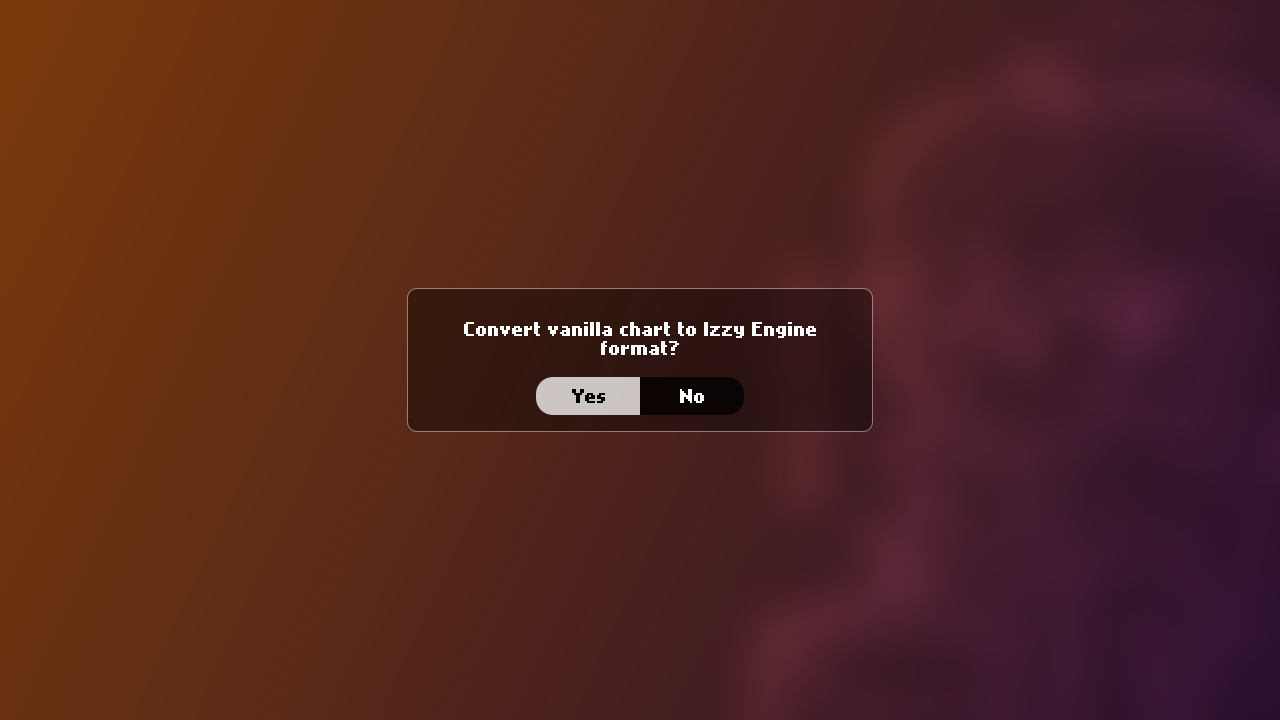
<style>
.page{position:relative;width:1280px;height:720px}
.page>*{position:absolute;margin:0}
.t1{font:16px "NokiaCellphoneFC-Small";color:#ffffff}
.t2{font:16px "NokiaCellphoneFC-Small";color:#000000}
</style>
<div class="page">
<p class="t1" style="left:464px;top:322px;width:352px;height:33px;text-align:center">Convert vanilla chart to Izzy Engine<br>format?</p>
<p class="t2" style="left:572px;top:389px;width:33px;height:14px">Yes</p>
<p class="t1" style="left:680px;top:389px;width:24px;height:14px">No</p>
</div>
